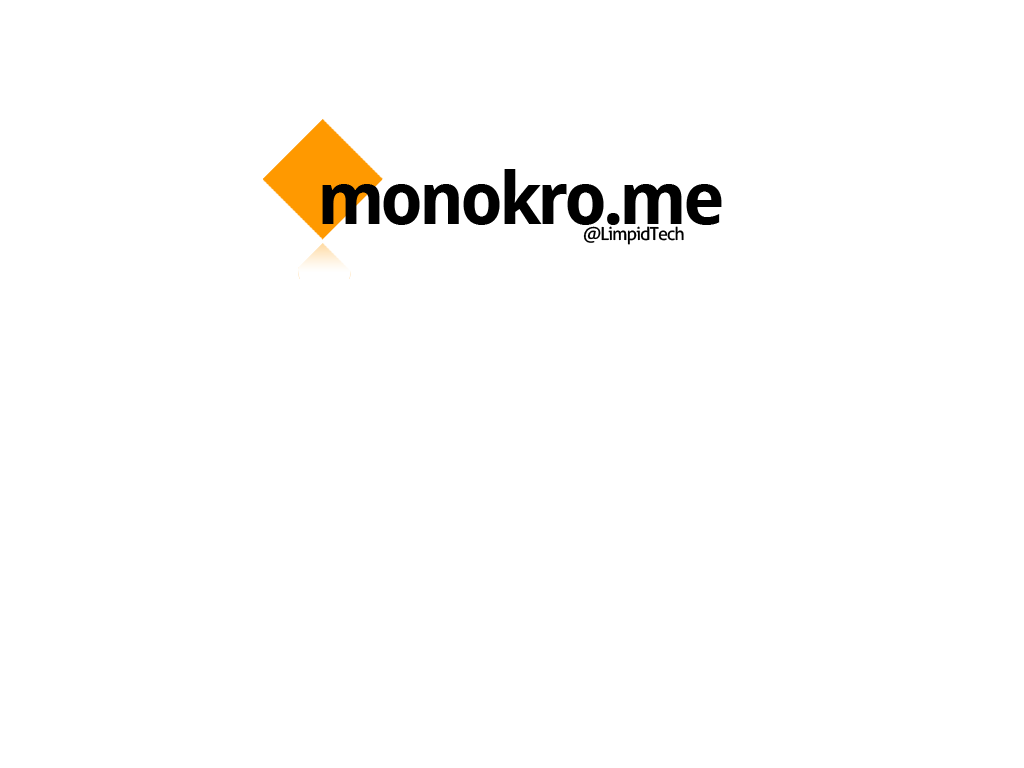
<style>
.page{position:relative;width:1024px;height:768px;background:#ffffff}
.page>*{position:absolute;margin:0}
.t1{font:72px "DroidSans-Bold";letter-spacing:-0.06em;color:#000000}
.t2{font:18px "Aller";letter-spacing:-0.06em;color:#000000}
</style>
<div class="page">
<p class="t1" style="left:322px;top:169px;width:400px;height:56px">monokro.me</p>
<p class="t2" style="left:583px;top:226px;width:101px;height:19px">@LimpidTech</p>
</div>
